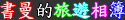
<style>
.page{position:relative;width:125px;height:20px;background:#333333}
.page>*{position:absolute;margin:0}
.t1{font:18.7px "DFKaiShu-SB-Estd-BF";color:#ffffff}
</style>
<div class="page">
<p class="t1" style="left:0px;top:1px;width:16px;height:18px">書</p>
<p class="t1" style="left:19px;top:2px;width:15px;height:17px">曼</p>
<p class="t1" style="left:37px;top:3px;width:15px;height:15px">的</p>
<p class="t1" style="left:54px;top:2px;width:18px;height:16px">旅</p>
<p class="t1" style="left:72px;top:2px;width:18px;height:16px">遊</p>
<p class="t1" style="left:91px;top:2px;width:16px;height:17px">相</p>
<p class="t1" style="left:109px;top:1px;width:16px;height:18px">簿</p>
</div>
